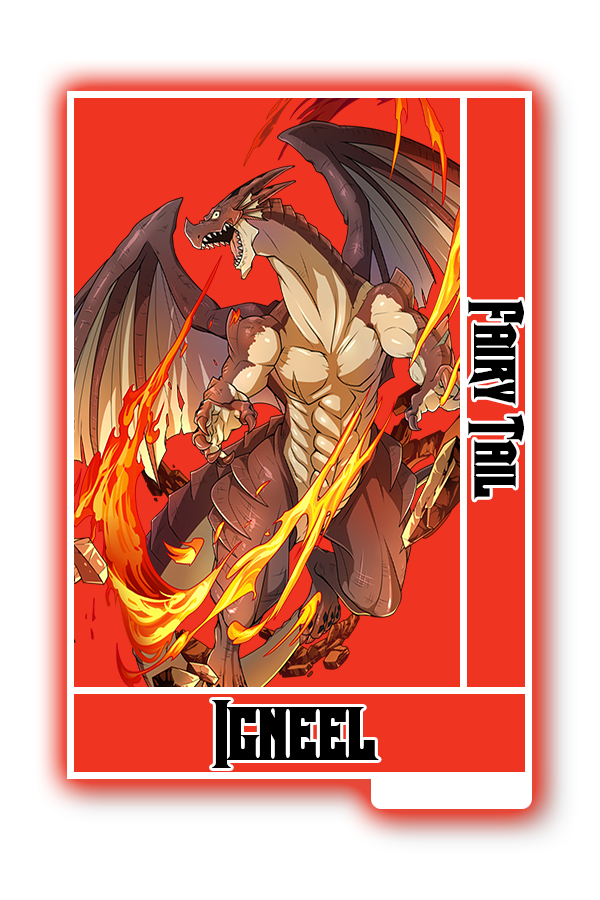
<style>
.page{position:relative;width:600px;height:900px;background:#ffffff}
.page>*{position:absolute;margin:0}
.t1{font:61.5px "Crown-Title";color:#000000}
.t2{font:79.9px "Crown-Title";color:#000000}
</style>
<div class="page">
<p class="t1" style="left:468px;top:299px;width:56px;height:201px;rotate:90deg">Fairy Tail</p>
<p class="t2" style="left:212px;top:700px;width:167px;height:68px">Igneel</p>
</div>
